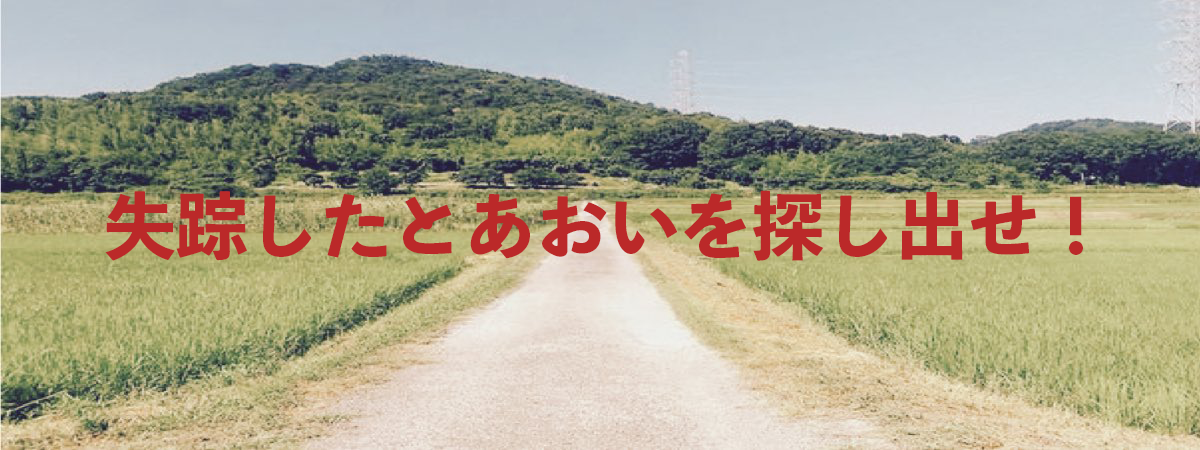
<style>
.page{position:relative;width:1200px;height:450px}
.page>*{position:absolute;margin:0}
.t1{font:72px "ToppanBunkyuMidashiGothicStdN-ExtraBold";color:#bb2929}
</style>
<div class="page">
<p class="t1" style="left:105px;top:190px;width:978px;height:71px">失踪したとあおいを探し出せ！</p>
</div>
